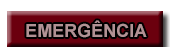
<style>
.page{position:relative;width:170px;height:47px;background:#ffffff}
.page>*{position:absolute;margin:0}
.t1{font:18px "Arial-BoldMT";color:#b29194}
</style>
<div class="page">
<p class="t1" style="left:26px;top:20px;width:121px;height:18px">EMERGÊNCIA</p>
</div>
